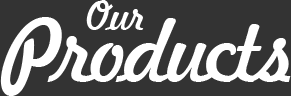
<style>
.page{position:relative;width:291px;height:96px;background:#333333}
.page>*{position:absolute;margin:0}
.t1{font:40px "Freehand521BT-RegularC";letter-spacing:-0.05em;color:#ffffff}
.t2{font:84px "Freehand521BT-RegularC";letter-spacing:-0.05em;color:#ffffff}
</style>
<div class="page">
<p class="t1" style="left:86px;top:0px;width:58px;height:30px">Our</p>
<p class="t2" style="left:0px;top:17px;width:291px;height:79px">Products</p>
</div>
